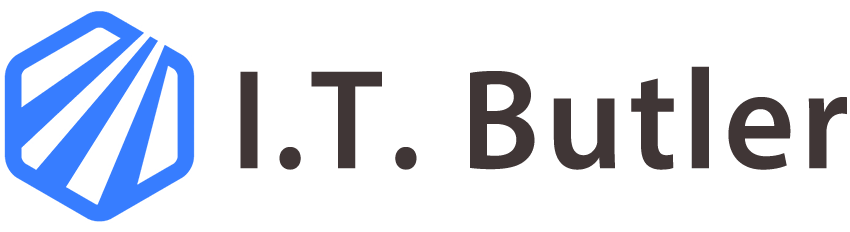
<style>
.page{position:relative;width:850px;height:232px;background:#ffffff}
.page>*{position:absolute;margin:0}
.t1{font:142.7px "MyriadPro-Semibold";letter-spacing:0.04em;color:#403636;scale:0.96 1}
</style>
<div class="page">
<p class="t1" style="left:240px;top:66px;width:607px;height:104px">I.T. Butler</p>
</div>
